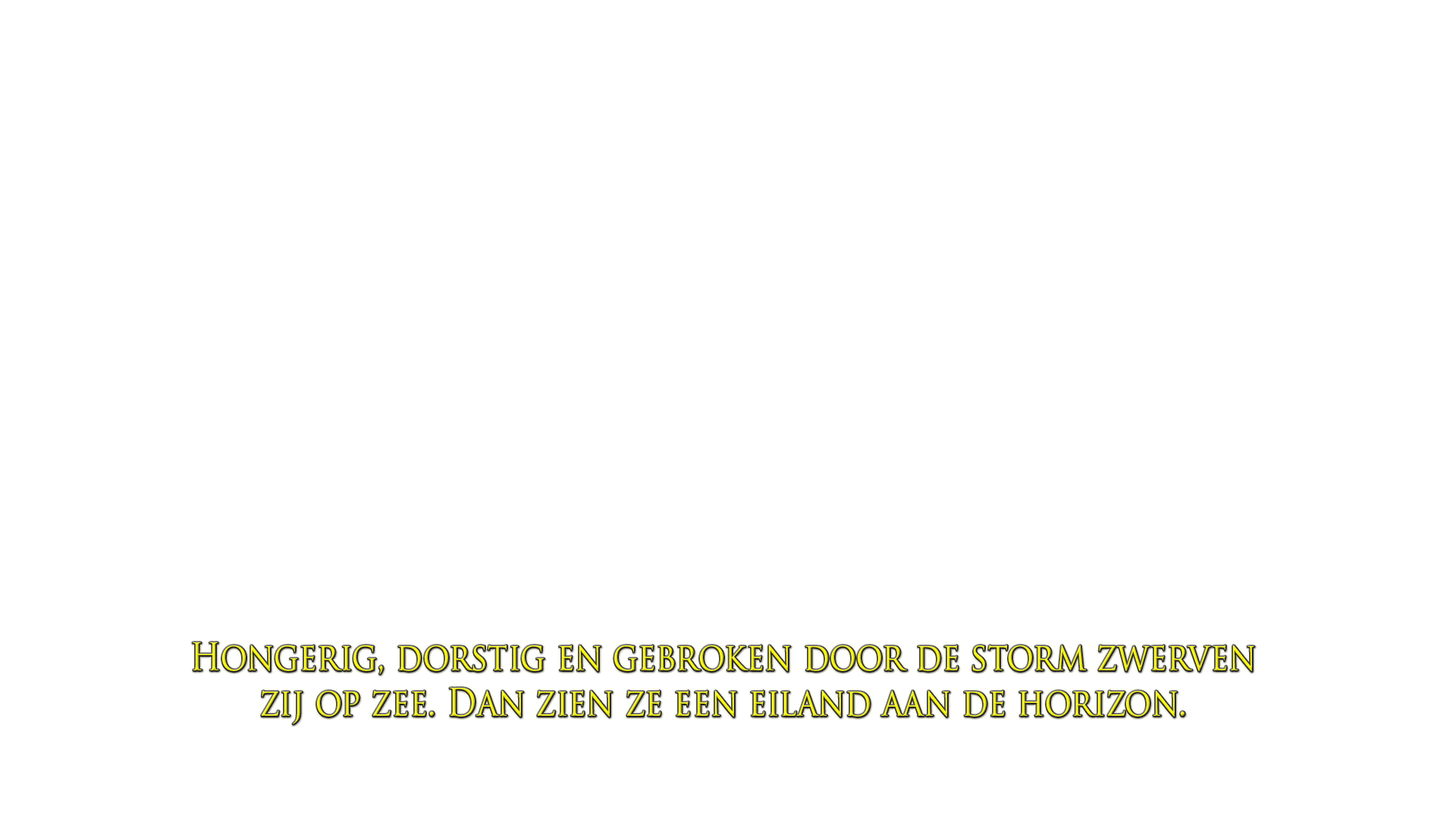
<style>
.page{position:relative;width:1456px;height:819px;background:#ffffff}
.page>*{position:absolute;margin:0}
.t1{font:37.9px "TrajanPro-Regular";scale:0.87 1}
</style>
<div class="page">
<p class="t1" style="left:193px;top:642px;width:1061px;height:82px;text-align:center">Hongerig, dorstig en gebroken door de storm zwerven <br>zij op zee. Dan zien ze een eiland aan de horizon.</p>
</div>
